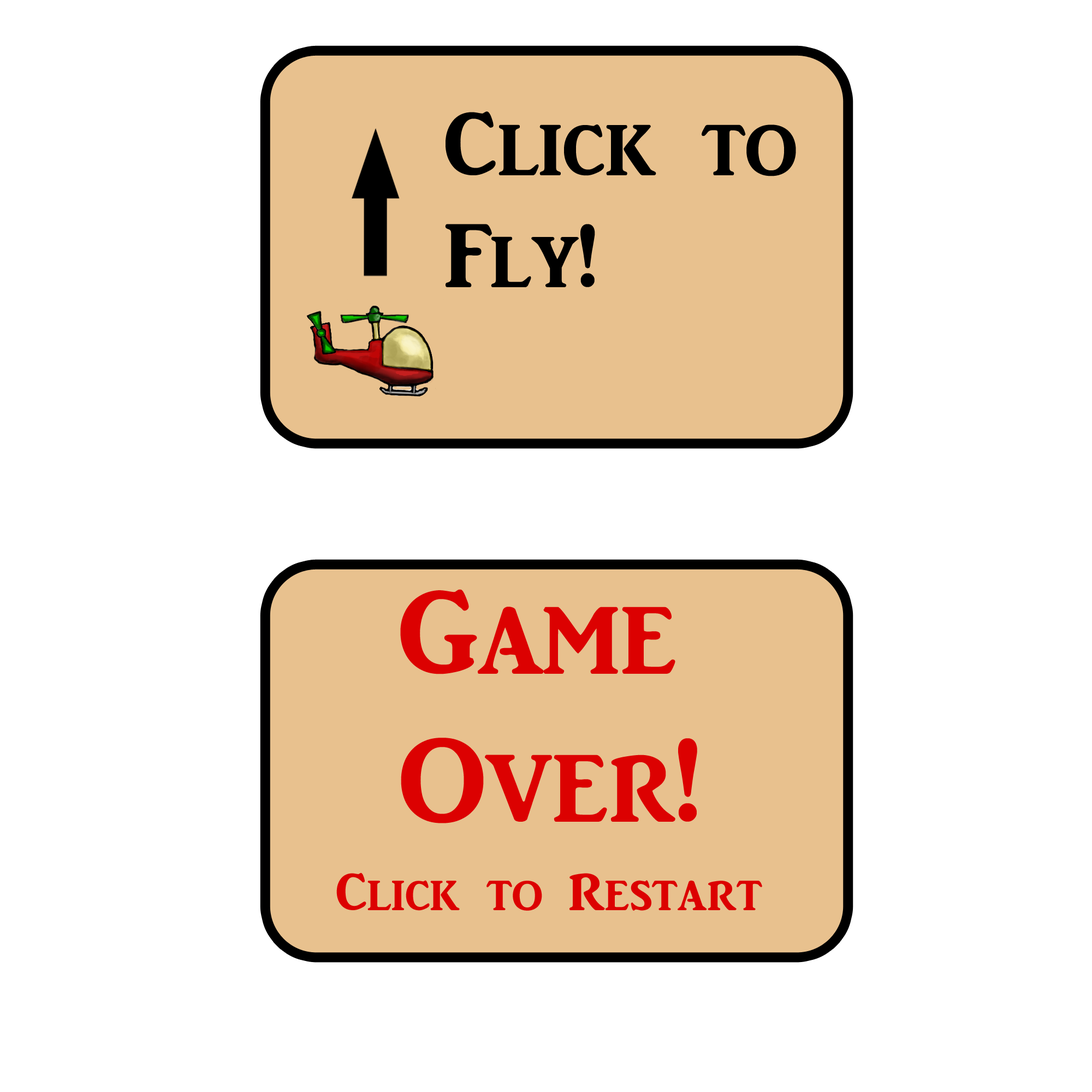
<style>
.page{position:relative;width:1092px;height:1092px;background:#ffffff}
.page>*{position:absolute;margin:0}
.t1{font:93px "ARJULIAN";color:#000000}
.t2{font:123.3px "ARJULIAN";color:#dc0101}
.t3{font:54.5px "ARJULIAN";color:#dc0101}
</style>
<div class="page">
<p class="t1" style="left:445px;top:111px;width:351px;height:176px">Click to <br>Fly!</p>
<p class="t2" style="left:400px;top:589px;width:297px;height:234px">Game <br>Over!</p>
<p class="t3" style="left:336px;top:872px;width:426px;height:39px">Click to Restart</p>
</div>
